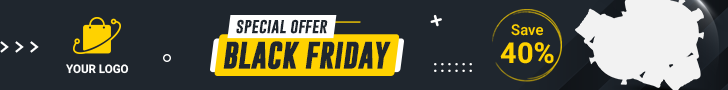
<style>
.page{position:relative;width:728px;height:90px;background:#1f262e}
.page>*{position:absolute;margin:0}
.t1{font:15.3px "GoboldBold";color:#1f262e}
.t2{font:14.8px "Heebo-Medium";color:#ffd200}
.t3{font:27.5px "GoboldBold";color:#1f262e;font-weight:bold}
.t4{font:28.9px "Heebo-Bold";color:#ffd200}
.t5{font:11.8px "Heebo-Bold";color:#ffffff}
</style>
<div class="page">
<p class="t1" style="left:236px;top:19px;width:92px;height:15px">special offer</p>
<p class="t2" style="left:511px;top:24px;width:33px;height:12px">Save</p>
<p class="t3" style="left:223px;top:41px;width:168px;height:29px">BLACK FRIDAY</p>
<p class="t4" style="left:500px;top:42px;width:54px;height:22px">40%</p>
<p class="t5" style="left:66px;top:64px;width:63px;height:10px">YOUR LOGO</p>
</div>
